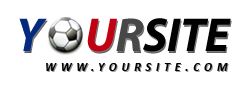
<style>
.page{position:relative;width:250px;height:90px;background:#ffffff}
.page>*{position:absolute;margin:0}
.t1{font:48px "MyriadPro-BoldIt";letter-spacing:-0.01em;color:#020202}
.t2{font:48px "MyriadPro-BoldIt";letter-spacing:-0.01em;color:#032a7e}
.t3{font:48px "MyriadPro-BoldIt";letter-spacing:-0.01em;color:#bf0113}
.t4{font:48px "MyriadPro-BoldIt";letter-spacing:-0.01em;color:#484747}
.t5{font:12px "Calibri-BoldItalic";letter-spacing:0.4em;color:#020202;text-transform:uppercase}
</style>
<div class="page">
<p class="t1" style="left:19px;top:18px;width:212px;height:34px"><span class="t2">Y     </span><span class="t3">U</span><span class="t4">R</span>SITE</p>
<p class="t5" style="left:46px;top:63px;width:182px;height:8px">WWW.YOURSITE.COM</p>
</div>
